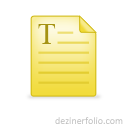
<style>
.page{position:relative;width:128px;height:128px;background:#ffffff}
.page>*{position:absolute;margin:0}
.t1{font:30px "TimesNewRomanPSMT";color:#a59313}
.t2{font:10px "Calibri"}
</style>
<div class="page">
<p class="t1" style="left:38px;top:24px;width:18px;height:20px">T</p>
<p class="t2" style="left:55px;top:117px;width:68px;height:7px">dezinerfolio.com</p>
</div>
